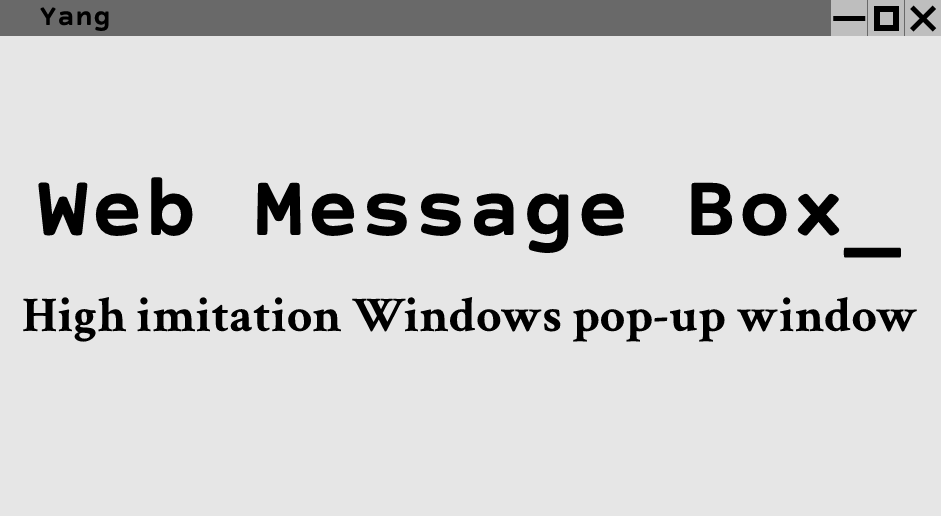
<style>
.page{position:relative;width:941px;height:516px;background:#e6e6e6}
.page>*{position:absolute;margin:0}
.t1{font:30px "CourierPrimeSans-Bold";color:#000000}
.t2{font:90px "CourierPrimeSans-Bold";color:#000000}
.t3{font:50px "CrimsonText-Bold";color:#000000}
</style>
<div class="page">
<p class="t1" style="left:40px;top:7px;width:69px;height:25px">Yang</p>
<p class="t2" style="left:38px;top:177px;width:864px;height:81px">Web Message Box_</p>
<p class="t3" style="left:23px;top:297px;width:894px;height:45px">High imitation Windows pop-up window</p>
</div>
